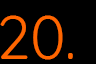
<style>
.page{position:relative;width:96px;height:64px;background:#000000}
.page>*{position:absolute;margin:0}
.t1{font:60px "Quicksand-Regular";color:#ff6600}
</style>
<div class="page">
<p class="t1" style="left:0px;top:15px;width:73px;height:45px">.20</p>
</div>
